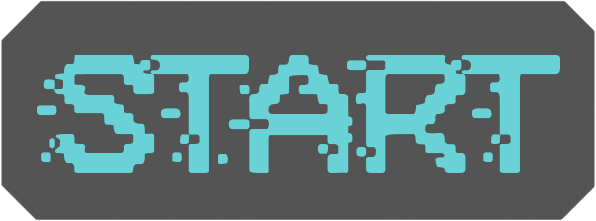
<style>
.page{position:relative;width:596px;height:221px;background:#545454}
.page>*{position:absolute;margin:0}
.t1{font:168.7px "PositiveSystem";color:#68d2d6}
</style>
<div class="page">
<p class="t1" style="left:37px;top:55px;width:523px;height:118px">Start</p>
</div>
